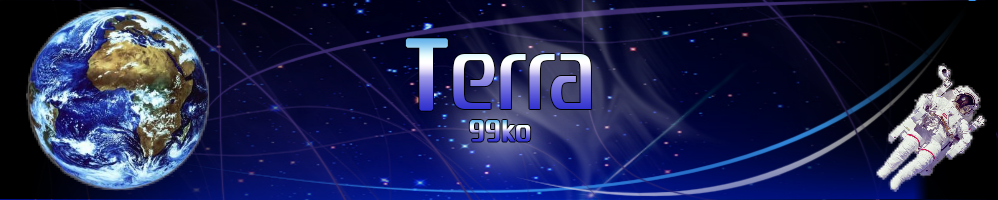
<style>
.page{position:relative;width:998px;height:200px}
.page>*{position:absolute;margin:0}
.t1{font:120px "Zrnic"}
.t2{font:120px "Zrnic";font-weight:bold}
.t3{font:36px "Zrnic";font-weight:bold}
</style>
<div class="page">
<p class="t1" style="left:405px;top:38px;width:186px;height:73px"><span class="t2">T</span>erra</p>
<p class="t3" style="left:469px;top:120px;width:62px;height:22px">99ko</p>
</div>
